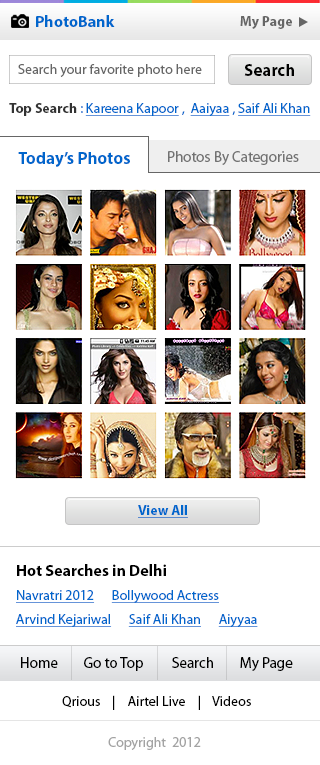
<style>
.page{position:relative;width:320px;height:765px;background:#ffffff}
.page>*{position:absolute;margin:0}
.t1{font:16px "MyriadPro-Bold";color:#0066cc}
.t2{font:14px "MyriadPro-Bold";color:#666666}
.t3{font:14px "MyriadPro-Regular";color:#666666}
.t4{font:17px "MyriadPro-Bold";color:#000000}
.t5{font:14px "MyriadPro-Regular";color:#0066cc;text-decoration:underline}
.t6{font:14px "MyriadPro-Bold";color:#333333}
.t7{font:14px "MyriadPro-Regular";color:#0066cc}
.t8{font:17px "MyriadPro-Bold";color:#0066cc}
.t9{font:15px "MyriadPro-Regular";color:#727272}
.t10{font:14px "MyriadPro-Bold";color:#0066cc;text-decoration:underline}
.t11{font:16px "MyriadPro-Bold";color:#000000}
.t12{font:14px/24px "MyriadPro-Regular";color:#0066cc;text-decoration:underline}
.t13{font:15px "MyriadPro-Regular";color:#000000}
.t14{font:14px "MyriadPro-Regular";color:#000000}
.t15{font:14px "MyriadPro-Regular";color:#a3a3a3}
</style>
<div class="page">
<p class="t1" style="left:36px;top:15px;width:79px;height:12px">PhotoBank</p>
<p class="t2" style="left:240px;top:16px;width:52px;height:13px">My Page</p>
<p class="t3" style="left:18px;top:64px;width:184px;height:13px">Search your favorite photo here</p>
<p class="t4" style="left:244px;top:64px;width:50px;height:12px">Search</p>
<p class="t5" style="left:9px;top:103px;width:302px;height:13px"><span class="t6">Top Search</span><span class="t7"> : </span>Kareena Kapoor<span class="t7"> ,  </span>Aaiyaa<span class="t7"> , </span>Saif Ali Khan</p>
<p class="t8" style="left:18px;top:152px;width:112px;height:15px">Today’s Photos</p>
<p class="t9" style="left:168px;top:151px;width:131px;height:14px">Photos By Categories</p>
<p class="t10" style="left:138px;top:505px;width:50px;height:13px">View All</p>
<p class="t11" style="left:17px;top:564px;width:149px;height:12px">Hot Searches in Delhi</p>
<p class="t12" style="left:16px;top:590px;width:242px;height:37px">Navratri 2012      Bollywood Actress     <br>Arvind Kejariwal      Saif Ali Khan      Aiyyaa</p>
<p class="t13" style="left:21px;top:657px;width:272px;height:14px">Home        Go to Top         Search        My Page</p>
<p class="t14" style="left:62px;top:695px;width:189px;height:15px">Qrious    |    Airtel Live    |    Videos</p>
<p class="t15" style="left:108px;top:737px;width:93px;height:13px">Copyright  2012</p>
</div>
